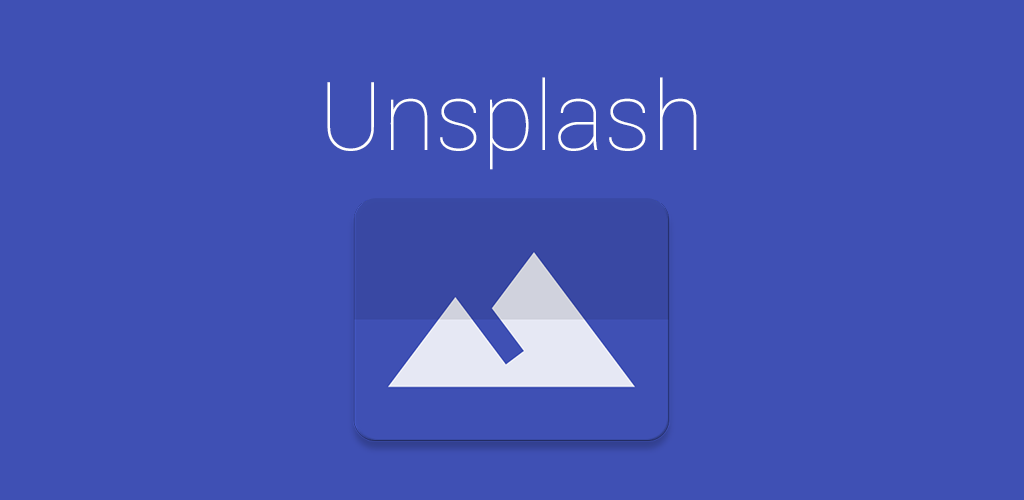
<style>
.page{position:relative;width:1024px;height:500px;background:#3f50b4}
.page>*{position:absolute;margin:0}
.t1{font:95.2px "Roboto-Thin";color:#ffffff}
</style>
<div class="page">
<p class="t1" style="left:327px;top:77px;width:370px;height:93px">Unsplash</p>
</div>
